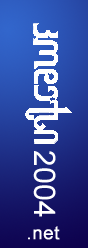
<style>
.page{position:relative;width:88px;height:248px}
.page>*{position:absolute;margin:0}
.t1{font:30px "ArialMT";letter-spacing:0.015em;color:#ffffff;text-transform:uppercase}
.t2{font:18px "ArialMT";letter-spacing:0.015em;color:#ffffff;font-weight:bold}
.t3{font:18px "ArialMT";letter-spacing:0.015em;color:#ffffff;font-variant:small-caps;font-weight:bold}
</style>
<div class="page">
<p class="t1" style="left:33px;top:151px;width:23px;height:66px;rotate:90deg">2004</p>
<p class="t2" style="left:28px;top:226px;width:32px;height:14px"><span class="t3">.</span>net</p>
</div>
